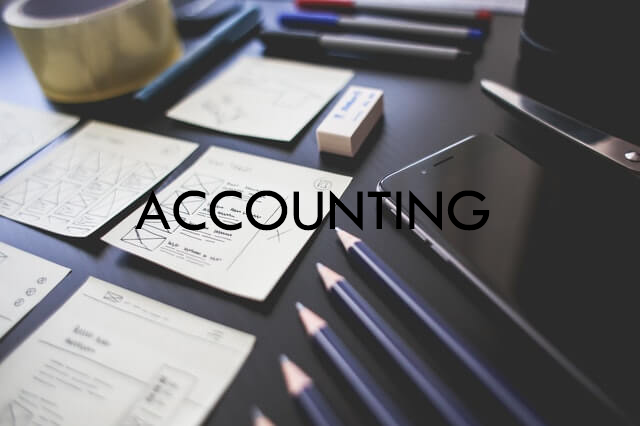
<style>
.page{position:relative;width:640px;height:426px}
.page>*{position:absolute;margin:0}
.t1{font:60px "TwCenMT-Regular";color:#000000}
</style>
<div class="page">
<p class="t1" style="left:135px;top:190px;width:355px;height:41px">ACCOUNTING</p>
</div>
